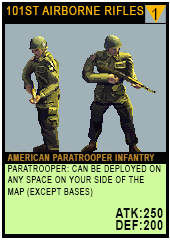
<style>
.page{position:relative;width:170px;height:241px;background:#a0b2b8}
.page>*{position:absolute;margin:0}
.t1{font:11.6px "ArialMT";letter-spacing:0.08em;color:#ffb800;text-transform:uppercase;scale:0.86 1}
.t2{font:17.4px "ArialMT";letter-spacing:0.08em;color:#000000;text-transform:uppercase;scale:0.86 1}
.t3{font:9.3px/11.2px "ArialMT";letter-spacing:0.08em;color:#020100;text-transform:uppercase;scale:0.76 1}
.t4{font:9.3px/20.2px "Arial-BoldMT";letter-spacing:0.08em;color:#b4832c;text-transform:uppercase;scale:0.76 1}
.t5{font:13.9px/12px "Arial-BoldMT";letter-spacing:0.08em;color:#050606;text-transform:uppercase;scale:0.76 1}
</style>
<div class="page">
<p class="t1" style="left:7px;top:6px;width:137px;height:9px">101ST AIRBORNE RIFLES</p>
<p class="t2" style="left:152px;top:8px;width:5px;height:12px">1</p>
<p class="t3" style="left:7px;top:154px;width:156px;height:76px"><span class="t4">AMERICAN PARATROOPER INFANTRY</span><br>PARATROOPER: CAN BE DEPLOYED on ANY SPace ON YOUR SIDE OF THE map (EXCEPT BASES)<br><br><span class="t5">atk:250<br>def:200</span></p>
</div>
